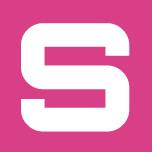
<style>
.page{position:relative;width:152px;height:152px;background:#d83f87}
.page>*{position:absolute;margin:0}
.t1{font:150px "Orbitron-Black";letter-spacing:-0.03em;color:#ffffff}
</style>
<div class="page">
<p class="t1" style="left:21px;top:23px;width:109px;height:109px">S</p>
</div>
